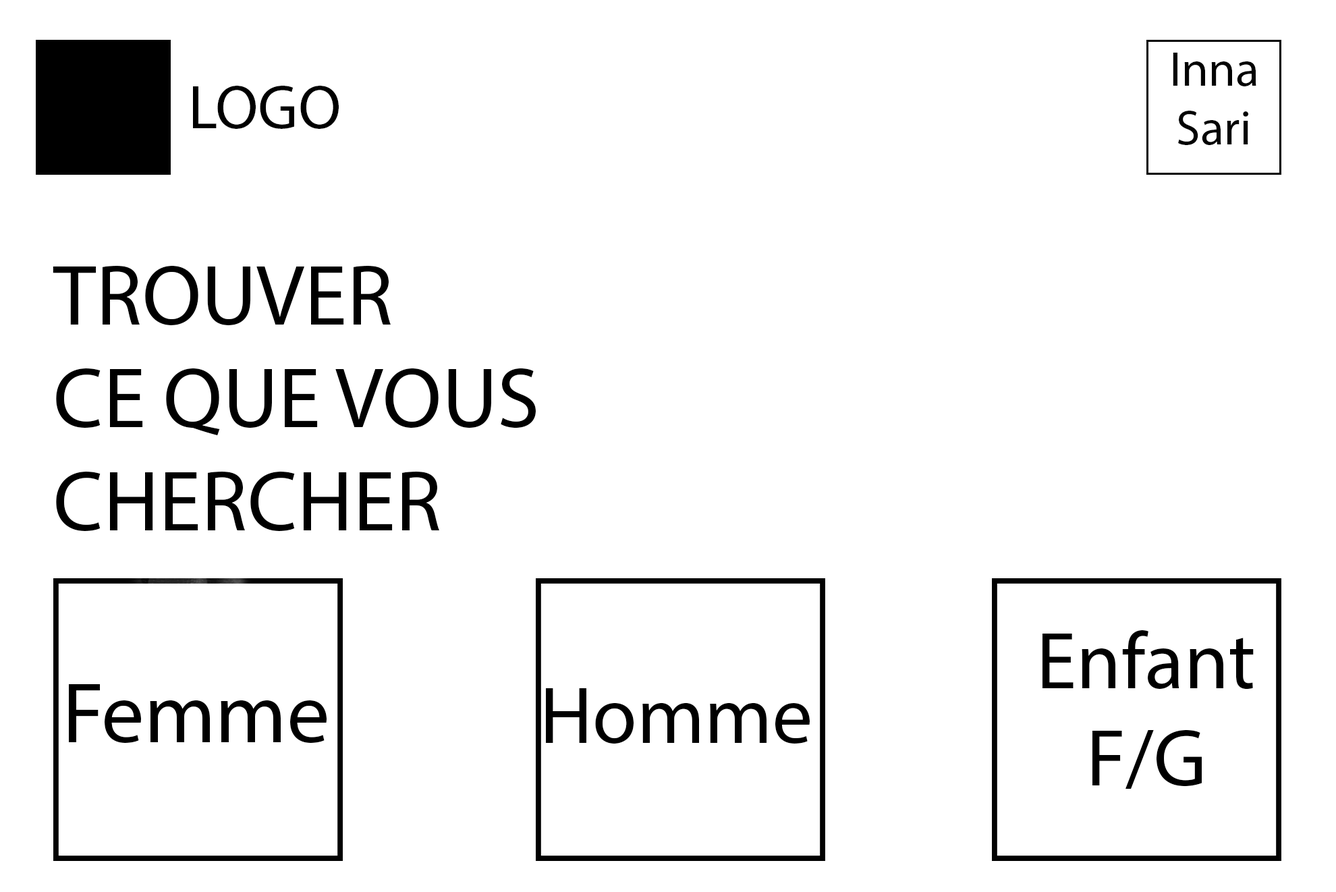
<style>
.page{position:relative;width:1336px;height:892px;background:#ffffff}
.page>*{position:absolute;margin:0}
.t1{font:48.6px "MyriadPro-Regular";color:#020202}
.t2{font:62.1px "MyriadPro-Regular";color:#000000}
.t3{font:85.7px "MyriadPro-Regular";color:#000000}
.t4{font:81px "MyriadPro-Regular";color:#000000}
</style>
<div class="page">
<p class="t1" style="left:1173px;top:53px;width:84px;height:92px;text-align:center">Inna<br>Sari</p>
<p class="t2" style="left:193px;top:86px;width:146px;height:43px">LOGO</p>
<p class="t3" style="left:53px;top:266px;width:483px;height:265px">TROUVER <br>CE QUE VOUS <br>CHERCHER</p>
<p class="t4" style="left:1043px;top:630px;width:211px;height:160px;text-align:center">Enfant<br>F/G</p>
<p class="t3" style="left:69px;top:684px;width:258px;height:59px">Femme</p>
<p class="t4" style="left:546px;top:688px;width:264px;height:56px">Homme</p>
</div>
